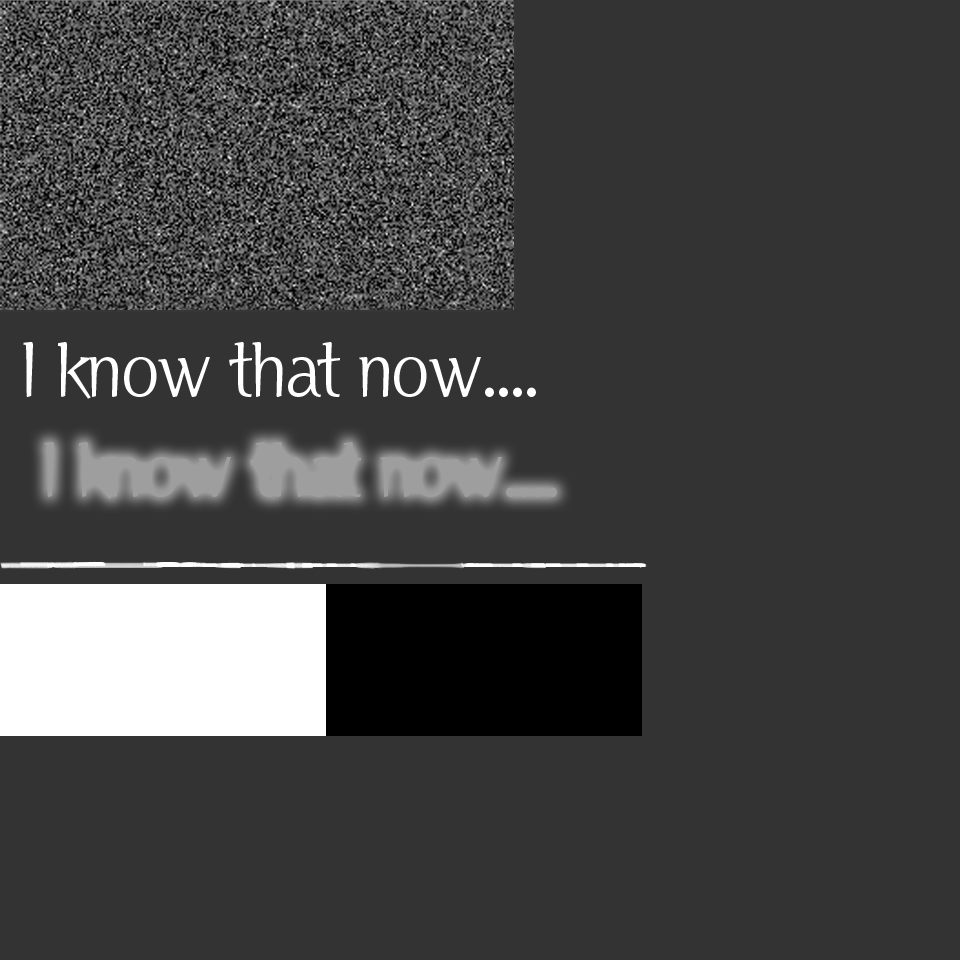
<style>
.page{position:relative;width:960px;height:960px;background:#333333}
.page>*{position:absolute;margin:0}
.t1{font:74px "MoariaStd-Regular";letter-spacing:-0.06em;color:#ffffff;scale:0.95 1}
.t2{font:74px "MoariaStd-Regular";letter-spacing:-0.06em;color:#9e9e9e;scale:0.95 1}
</style>
<div class="page">
<p class="t1" style="left:23px;top:342px;width:513px;height:57px">I know that now....</p>
<p class="t2" style="left:44px;top:442px;width:513px;height:57px">I know that now....</p>
</div>
